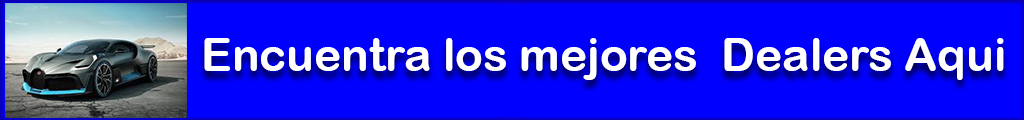
<style>
.page{position:relative;width:1024px;height:120px;background:#0000ff}
.page>*{position:absolute;margin:0}
.t1{font:45.8px "ArialRoundedMTBold";color:#ffffff}
</style>
<div class="page">
<p class="t1" style="left:204px;top:38px;width:800px;height:42px">Encuentra los mejores  Dealers Aqui</p>
</div>
